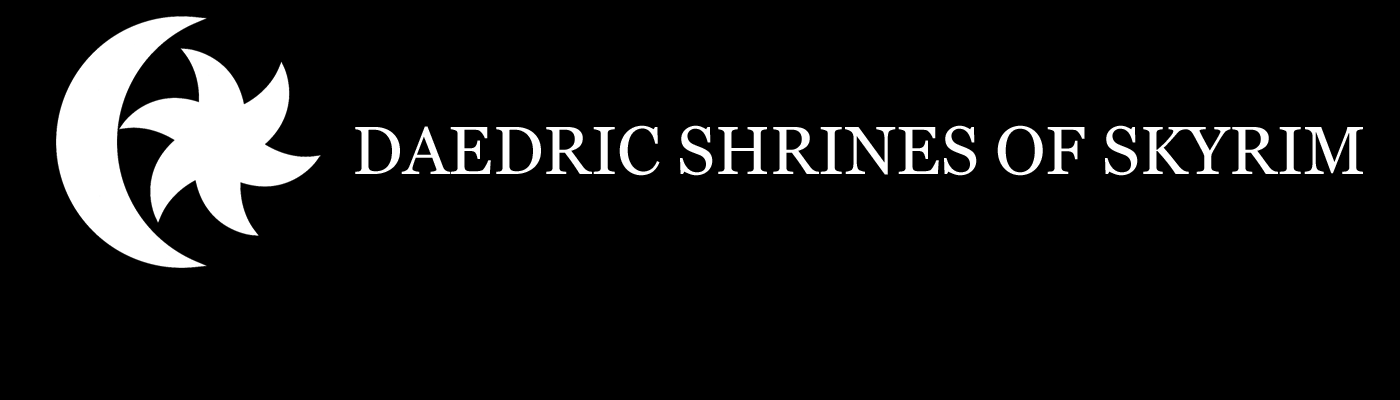
<style>
.page{position:relative;width:1400px;height:400px;background:#000000}
.page>*{position:absolute;margin:0}
.t1{font:67.8px "Georgia";color:#ffffff}
</style>
<div class="page">
<p class="t1" style="left:355px;top:125px;width:1008px;height:51px">DAEDRIC SHRINES OF SKYRIM</p>
</div>
